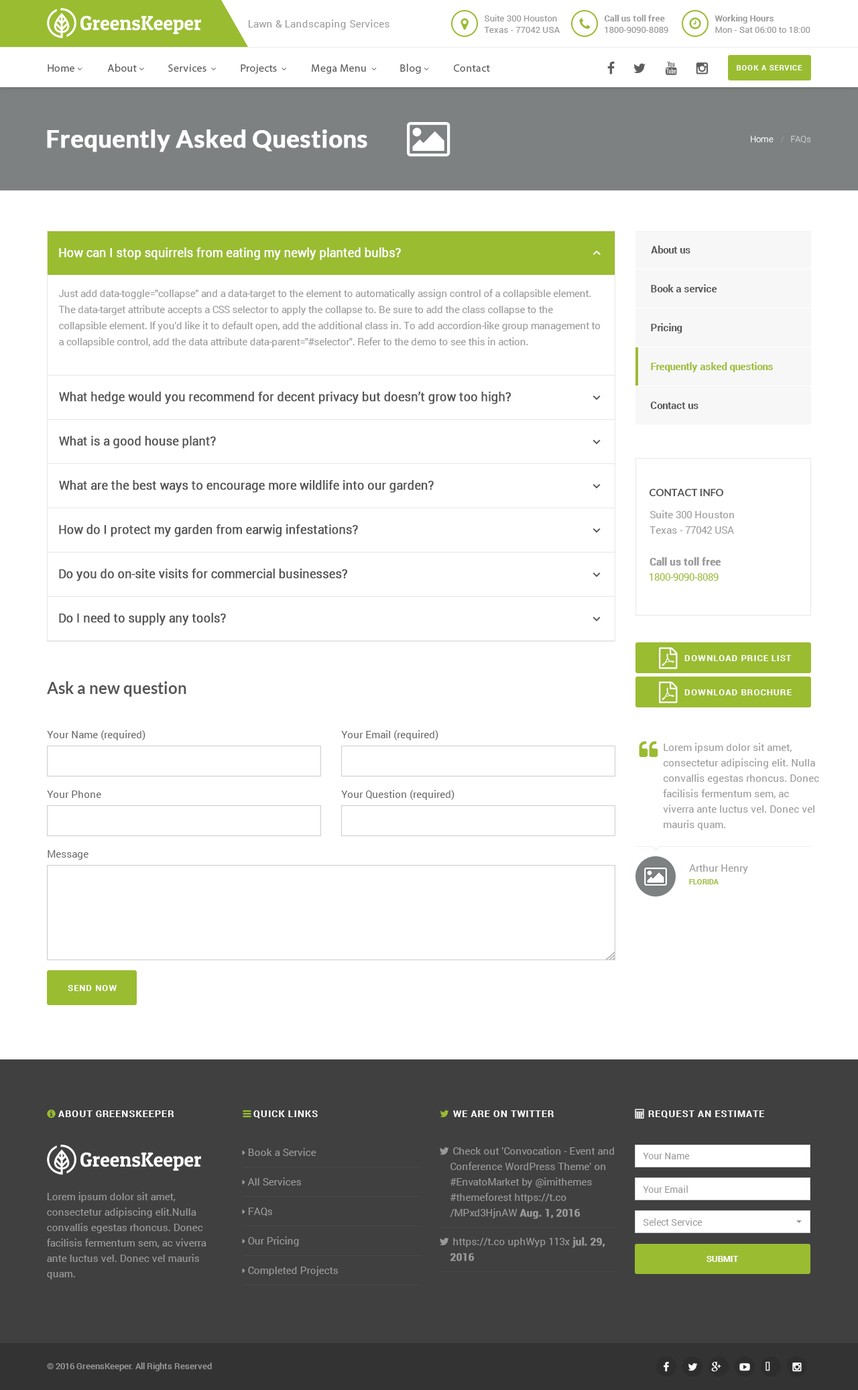
<style>
.page{position:relative;width:858px;height:1390px;background:#ffffff}
.page>*{position:absolute;margin:0}
.t1{font:8.7px/11.4px "Roboto-Regular";letter-spacing:0.02em;color:#999999}
.t2{font:8.7px/11.4px "Roboto-Bold";letter-spacing:0.02em;color:#999999}
.t3{font:10.1px "Roboto-Regular";letter-spacing:0.02em;color:#999999}
.t4{font:10.7px "MyriadPro-Regular";letter-spacing:0.02em;color:#5e5e5e}
.t5{font:7.4px "Roboto-Bold";letter-spacing:0.08em;color:#ffffff;text-transform:uppercase}
.t6{font:24.1px "Lato-Bold";color:#ffffff;font-weight:bold}
.t7{font:8.7px "Roboto-Light";color:#ffffff}
.t8{font:8.7px "Roboto-Light";color:#999999}
.t9{font:8.7px "Roboto-Light";color:#cccccc}
.t10{font:10.1px "Roboto-Bold";color:#555555}
.t11{font:12.1px "Roboto-Regular";letter-spacing:-0.02em;color:#ffffff;font-weight:bold}
.t12{font:10.1px/16.1px "Roboto-Regular";letter-spacing:-0.02em;color:#999999}
.t13{font:10.1px "Roboto-Bold";color:#9abc31}
.t14{font:12.1px "Roboto-Regular";letter-spacing:-0.02em;color:#555555;font-weight:bold}
.t15{font:10.1px "Lato-Bold";color:#555555;text-transform:uppercase}
.t16{font:10.1px/15.4px "Roboto-Regular";color:#999999}
.t17{font:10.1px "Roboto-Bold";color:#999999;font-weight:bold}
.t18{font:10.1px "Roboto-Regular";color:#9abc31}
.t19{font:8.7px "Roboto-Bold";letter-spacing:0.08em;color:#ffffff;text-transform:uppercase}
.t20{font:16.1px "Lato-Bold";color:#555555}
.t21{font:10.1px "Roboto-Regular";color:#666666}
.t22{font:10.1px "Roboto-Regular";color:#999999}
.t23{font:7.4px "Roboto-Bold";color:#9abc31;text-transform:uppercase}
.t24{font:9.4px "Roboto-Bold";letter-spacing:0.08em;color:#ffffff;text-transform:uppercase}
.t25{font:10.1px/15.4px "Roboto-Bold";color:#999999;font-weight:bold}
.t26{font:9.4px "Roboto-Regular";color:#999999}
.t27{font:8.7px "Roboto-Bold";color:#ffffff;text-transform:uppercase}
.t28{font:8.7px "Roboto-Medium";color:#999999}
</style>
<div class="page">
<p class="t1" style="left:484px;top:15px;width:76px;height:18px">Suite 300 Houston<br>Texas - 77042 USA</p>
<p class="t2" style="left:605px;top:15px;width:63px;height:18px">Call us toll free<br><span class="t1">1800-9090-8089</span></p>
<p class="t1" style="left:715px;top:15px;width:95px;height:18px"><span class="t2">Working Hours<br></span>Mon - Sat 06:00 to 18:00</p>
<p class="t3" style="left:248px;top:19px;width:141px;height:10px">Lawn &amp; Landscaping Services</p>
<p class="t4" style="left:454px;top:64px;width:36px;height:8px">Contact</p>
<p class="t5" style="left:737px;top:65px;width:65px;height:5px">Book a service</p>
<p class="t6" style="left:47px;top:129px;width:320px;height:23px">Frequently Asked Questions</p>
<p class="t7" style="left:751px;top:135px;width:23px;height:8px">Home</p>
<p class="t8" style="left:780px;top:135px;width:4px;height:8px">/</p>
<p class="t9" style="left:791px;top:135px;width:20px;height:8px">FAQs</p>
<p class="t10" style="left:651px;top:245px;width:39px;height:8px">About us</p>
<p class="t11" style="left:59px;top:247px;width:342px;height:13px">How can I stop squirrels from eating my newly planted bulbs?</p>
<p class="t12" style="left:58px;top:289px;width:543px;height:58px">Just add data-toggle="collapse" and a data-target to the element to automatically assign control of a collapsible element. <br>The data-target attribute accepts a CSS selector to apply the collapse to. Be sure to add the class collapse to the <br>collapsible element. If you'd like it to default open, add the additional class in. To add accordion-like group management to <br>a collapsible control, add the data attribute data-parent="#selector". Refer to the demo to see this in action.</p>
<p class="t10" style="left:651px;top:284px;width:66px;height:8px">Book a service</p>
<p class="t10" style="left:651px;top:323px;width:31px;height:10px">Pricing</p>
<p class="t13" style="left:651px;top:362px;width:122px;height:10px">Frequently asked questions</p>
<p class="t14" style="left:59px;top:391px;width:452px;height:13px">What hedge would you recommend for decent privacy but doesn’t grow too high?</p>
<p class="t10" style="left:650px;top:402px;width:49px;height:7px">Contact us</p>
<p class="t14" style="left:59px;top:436px;width:157px;height:12px">What is a good house plant?</p>
<p class="t14" style="left:59px;top:480px;width:375px;height:13px">What are the best ways to encourage more wildlife into our garden?</p>
<p class="t15" style="left:649px;top:489px;width:75px;height:7px">Contact Info</p>
<p class="t16" style="left:650px;top:510px;width:84px;height:24px">Suite 300 Houston<br>Texas - 77042 USA</p>
<p class="t14" style="left:59px;top:524px;width:299px;height:13px">How do I protect my garden from earwig infestations?</p>
<p class="t17" style="left:650px;top:557px;width:71px;height:9px">Call us toll free</p>
<p class="t14" style="left:59px;top:568px;width:288px;height:13px">Do you do on-site visits for commercial businesses?</p>
<p class="t18" style="left:650px;top:573px;width:69px;height:8px">1800-9090-8089</p>
<p class="t14" style="left:59px;top:613px;width:167px;height:12px">Do I need to supply any tools?</p>
<p class="t19" style="left:684px;top:655px;width:108px;height:6px">Download price list</p>
<p class="t20" style="left:47px;top:681px;width:139px;height:16px">Ask a new question</p>
<p class="t19" style="left:684px;top:689px;width:108px;height:6px">Download brochure</p>
<p class="t21" style="left:47px;top:730px;width:98px;height:10px">Your Name (required)</p>
<p class="t21" style="left:341px;top:730px;width:97px;height:10px">Your Email (required)</p>
<p class="t16" style="left:663px;top:743px;width:156px;height:87px">Lorem ipsum dolor sit amet, <br>consectetur adipiscing elit. Nulla <br>convallis egestas rhoncus. Donec <br>facilisis fermentum sem, ac <br>viverra ante luctus vel. Donec vel <br>mauris quam.</p>
<p class="t21" style="left:47px;top:790px;width:54px;height:8px">Your Phone</p>
<p class="t21" style="left:341px;top:790px;width:114px;height:10px">Your Question (required)</p>
<p class="t21" style="left:48px;top:850px;width:40px;height:9px">Message</p>
<p class="t22" style="left:689px;top:864px;width:59px;height:9px">Arthur Henry</p>
<p class="t23" style="left:689px;top:879px;width:30px;height:5px">Florida</p>
<p class="t19" style="left:68px;top:985px;width:49px;height:6px">Send now</p>
<p class="t24" style="left:58px;top:1110px;width:116px;height:7px">About GreensKeeper</p>
<p class="t24" style="left:253px;top:1110px;width:65px;height:8px">Quick Links</p>
<p class="t24" style="left:453px;top:1110px;width:101px;height:7px">We are on Twitter</p>
<p class="t24" style="left:648px;top:1110px;width:117px;height:8px">Request an Estimate</p>
<p class="t22" style="left:248px;top:1148px;width:68px;height:8px">Book a Service</p>
<p class="t16" style="left:450px;top:1146px;width:164px;height:73px">Check out 'Convocation - Event and <br>Conference WordPress Theme' on<br>#EnvatoMarket by @imithemes<br>#themeforest https://t.co<br>/MPxd3HjnAW <span class="t25">Aug. 1, 2016</span></p>
<p class="t26" style="left:643px;top:1152px;width:47px;height:7px">Your Name</p>
<p class="t22" style="left:247px;top:1177px;width:54px;height:8px">All Services</p>
<p class="t16" style="left:47px;top:1192px;width:159px;height:87px">Lorem ipsum dolor sit amet, <br>consectetur adipiscing elit.Nulla <br>convallis egestas rhoncus. Donec <br>facilisis fermentum sem, ac viverra <br>ante luctus vel. Donec vel mauris <br>quam.</p>
<p class="t26" style="left:643px;top:1185px;width:45px;height:8px">Your Email</p>
<p class="t22" style="left:248px;top:1207px;width:24px;height:9px">FAQs</p>
<p class="t26" style="left:643px;top:1218px;width:60px;height:7px">Select Service</p>
<p class="t22" style="left:248px;top:1236px;width:51px;height:10px">Our Pricing</p>
<p class="t16" style="left:450px;top:1237px;width:155px;height:24px">https://t.co uphWyp 113x<span class="t25"> jul. 29,<br>2016</span></p>
<p class="t22" style="left:248px;top:1266px;width:90px;height:10px">Completed Projects</p>
<p class="t27" style="left:707px;top:1256px;width:32px;height:6px">Submit</p>
<p class="t28" style="left:47px;top:1362px;width:165px;height:9px">© 2016 GreensKeeper. All Rights Reserved</p>
</div>
